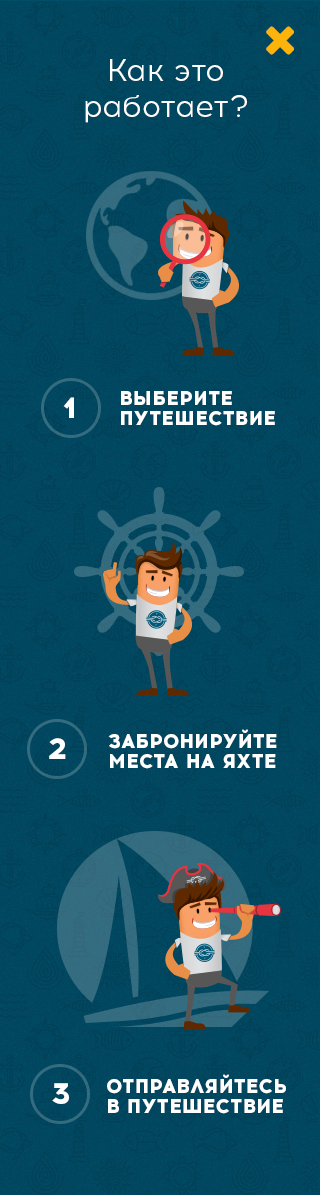
<style>
.page{position:relative;width:320px;height:1195px;background:#01465e}
.page>*{position:absolute;margin:0}
.t1{font:30px "Acrom-Regular";color:#ffffff}
.t2{font:30px "Acrom-ExtraBold";color:#ffffff}
.t3{font:20px/20px "Acrom-ExtraBold";color:#ffffff;text-transform:uppercase}
</style>
<div class="page">
<p class="t1" style="left:85px;top:59px;width:162px;height:64px;text-align:center">Как это<br>работает?</p>
<p class="t2" style="left:63px;top:397px;width:11px;height:21px">1</p>
<p class="t3" style="left:121px;top:391px;width:154px;height:35px">выберите <br>путешествие</p>
<p class="t3" style="left:108px;top:729px;width:169px;height:40px">забронируйте <br>места на яхте</p>
<p class="t2" style="left:49px;top:738px;width:17px;height:21px">2</p>
<p class="t2" style="left:52px;top:1083px;width:17px;height:21px">3</p>
<p class="t3" style="left:107px;top:1074px;width:179px;height:40px">Отправляйтесь <br>в путешествие</p>
</div>
